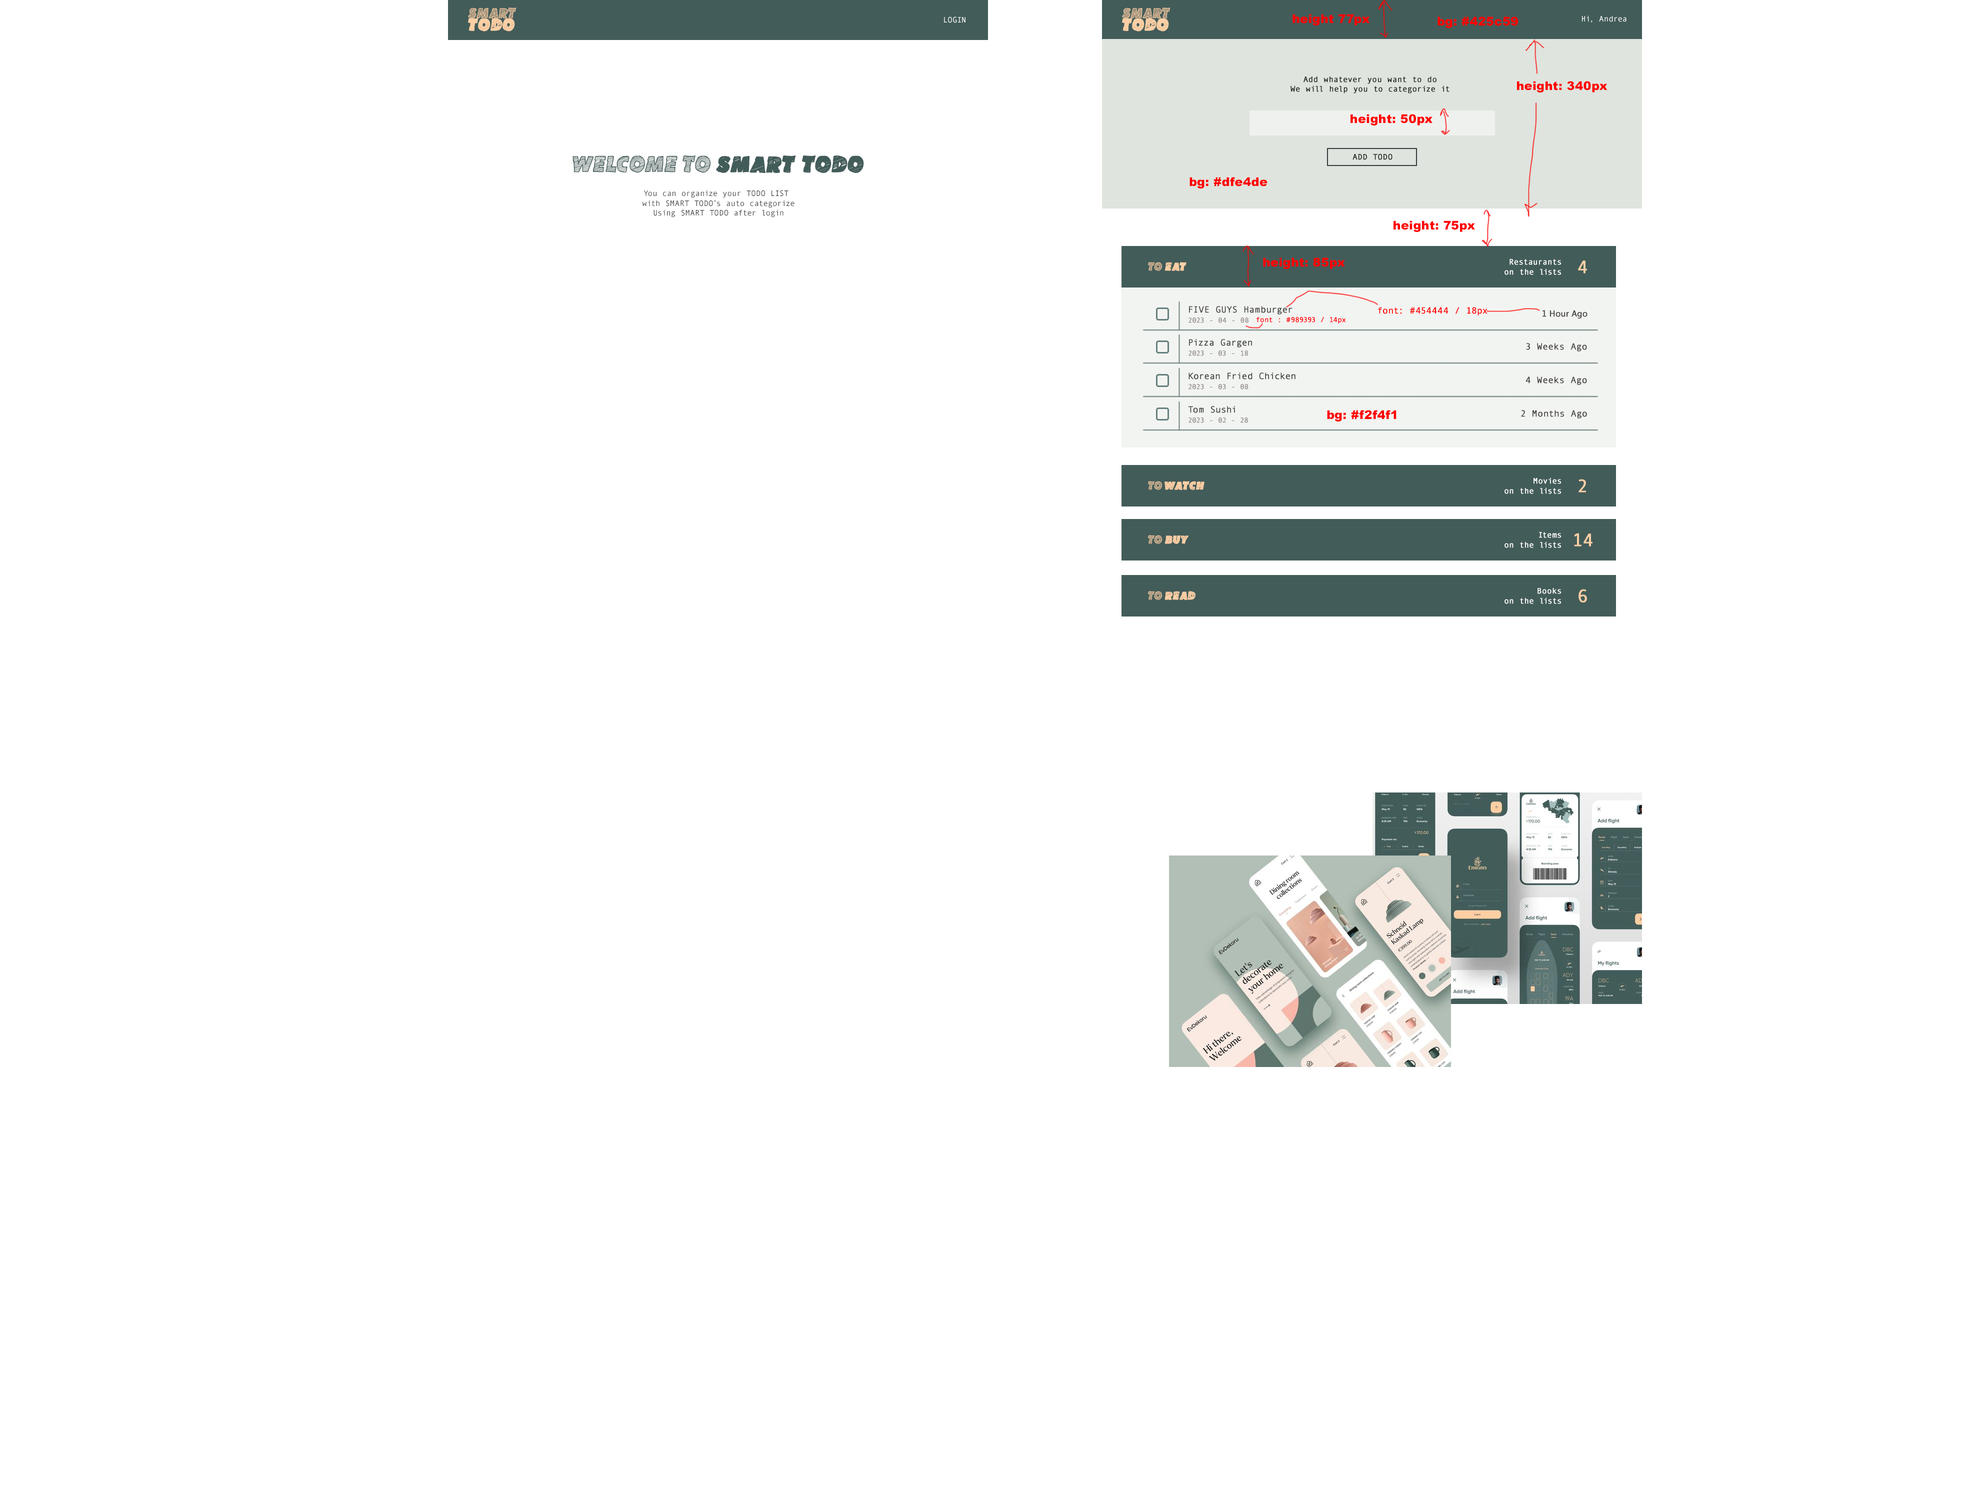
<style>
.page{position:relative;width:1984px;height:1488px;background:#ffffff}
.page>*{position:absolute;margin:0}
.t1{font:15px/9.5px "SketchCoursive";letter-spacing:0.01em;color:#fccfa5}
.t2{font:18px/12.5px "SketchCoursive";letter-spacing:0.01em;color:#fccfa5;font-weight:bold}
.t3{font:8px "AndaleMono";letter-spacing:0.01em;color:#ffffff}
.t4{font:12px "Arial-Black";letter-spacing:0.01em;color:#ff0000}
.t5{font:8px "AndaleMono";letter-spacing:0.01em;color:#222c24;font-weight:bold}
.t6{font:8px "AndaleMono";letter-spacing:0.01em;color:#454545}
.t7{font:24px "SketchCoursive";letter-spacing:0.01em;color:#425c59}
.t8{font:24px "SketchCoursive";letter-spacing:0.01em;color:#425c59;font-weight:bold}
.t9{font:12px "SketchCoursive";letter-spacing:0.01em;color:#fccfa5;font-weight:bold}
.t10{font:12px "SketchCoursive";letter-spacing:0.01em;color:#fccfa5}
.t11{font:8px "AndaleMono";letter-spacing:0.01em;color:#ffffff;font-weight:bold}
.t12{font:18px "AndaleMono";letter-spacing:0.01em;color:#fccfa5;font-weight:bold}
.t13{font:7px "AndaleMono";letter-spacing:0.01em;color:#989393;font-weight:bold}
.t14{font:9px "AndaleMono";letter-spacing:0.01em;color:#454444;font-weight:bold}
.t15{font:7px "AndaleMono";letter-spacing:0.01em;color:#ff0000;font-weight:bold}
.t16{font:9px "AndaleMono";letter-spacing:0.01em;color:#ff0000;font-weight:bold}
.t17{font:9px "MyriadPro-Regular";letter-spacing:0.01em;color:#454444;font-weight:bold}
</style>
<div class="page">
<p class="t1" style="left:468px;top:8px;width:48px;height:24px">SMART <br><span class="t2">TODO</span></p>
<p class="t3" style="left:944px;top:16px;width:22px;height:7px">LOGIN</p>
<p class="t1" style="left:1122px;top:8px;width:48px;height:24px">SMART <br><span class="t2">TODO</span></p>
<p class="t4" style="left:1292px;top:14px;width:78px;height:12px">height 77px</p>
<p class="t4" style="left:1438px;top:16px;width:80px;height:12px">bg: #425c59</p>
<p class="t3" style="left:1582px;top:16px;width:44px;height:6px">Hi, Andrea</p>
<p class="t5" style="left:1290px;top:76px;width:160px;height:18px;text-align:center">Add whatever you want to do<br>We will help you to categorize it</p>
<p class="t4" style="left:1517px;top:81px;width:91px;height:11px">height: 340px</p>
<p class="t4" style="left:1350px;top:114px;width:82px;height:12px">height: 50px</p>
<p class="t6" style="left:572px;top:156px;width:292px;height:62px;text-align:center"><span class="t7">WELCOME TO </span><span class="t8">SMART TODO<br><br></span>You can organize your TODO LIST <br>with SMART TODO’s auto categorize<br>Using SMART TODO after login</p>
<p class="t5" style="left:1352px;top:154px;width:40px;height:6px">ADD TODO</p>
<p class="t4" style="left:1190px;top:177px;width:78px;height:11px">bg: #dfe4de</p>
<p class="t4" style="left:1394px;top:220px;width:81px;height:12px">height: 75px</p>
<p class="t4" style="left:1263px;top:258px;width:82px;height:11px">height: 85px</p>
<p class="t9" style="left:1148px;top:262px;width:38px;height:9px"><span class="t10">TO </span>EAT</p>
<p class="t11" style="left:1504px;top:259px;width:57px;height:16px;text-align:right">Restaurants<br>on the lists</p>
<p class="t12" style="left:1578px;top:260px;width:9px;height:14px">4</p>
<p class="t13" style="left:1188px;top:318px;width:60px;height:5px">2023 - 04 - 08</p>
<p class="t14" style="left:1189px;top:306px;width:103px;height:8px">FIVE GUYS Hamburger</p>
<p class="t15" style="left:1256px;top:317px;width:90px;height:7px">font : #989393 / 14px</p>
<p class="t16" style="left:1378px;top:307px;width:110px;height:9px">font: #454444 / 18px</p>
<p class="t17" style="left:1542px;top:310px;width:46px;height:8px"><span class="t14">1</span> Hour Ago</p>
<p class="t14" style="left:1189px;top:339px;width:63px;height:9px">Pizza Gargen</p>
<p class="t13" style="left:1188px;top:350px;width:60px;height:6px">2023 - 03 - 18</p>
<p class="t14" style="left:1526px;top:343px;width:61px;height:9px">3 Weeks Ago</p>
<p class="t14" style="left:1188px;top:372px;width:108px;height:8px">Korean Fried Chicken</p>
<p class="t14" style="left:1526px;top:376px;width:61px;height:9px">4 Weeks Ago</p>
<p class="t13" style="left:1188px;top:384px;width:60px;height:6px">2023 - 03 - 08</p>
<p class="t14" style="left:1188px;top:406px;width:47px;height:7px">Tom Sushi</p>
<p class="t4" style="left:1327px;top:410px;width:69px;height:12px">bg: #f2f4f1</p>
<p class="t14" style="left:1521px;top:410px;width:66px;height:8px">2 Months Ago</p>
<p class="t13" style="left:1188px;top:418px;width:60px;height:5px">2023 - 02 - 28</p>
<p class="t9" style="left:1148px;top:481px;width:56px;height:9px"><span class="t10">TO </span>WATCH</p>
<p class="t11" style="left:1504px;top:478px;width:57px;height:16px;text-align:right">Movies<br>on the lists</p>
<p class="t12" style="left:1578px;top:479px;width:8px;height:13px">2</p>
<p class="t11" style="left:1504px;top:532px;width:57px;height:16px;text-align:right">Items<br>on the lists</p>
<p class="t12" style="left:1574px;top:533px;width:18px;height:13px">14</p>
<p class="t9" style="left:1148px;top:535px;width:41px;height:9px"><span class="t10">TO </span>BUY</p>
<p class="t9" style="left:1148px;top:591px;width:48px;height:9px"><span class="t10">TO </span>READ</p>
<p class="t11" style="left:1504px;top:588px;width:57px;height:16px;text-align:right">Books<br>on the lists</p>
<p class="t12" style="left:1578px;top:589px;width:9px;height:13px">6</p>
</div>
